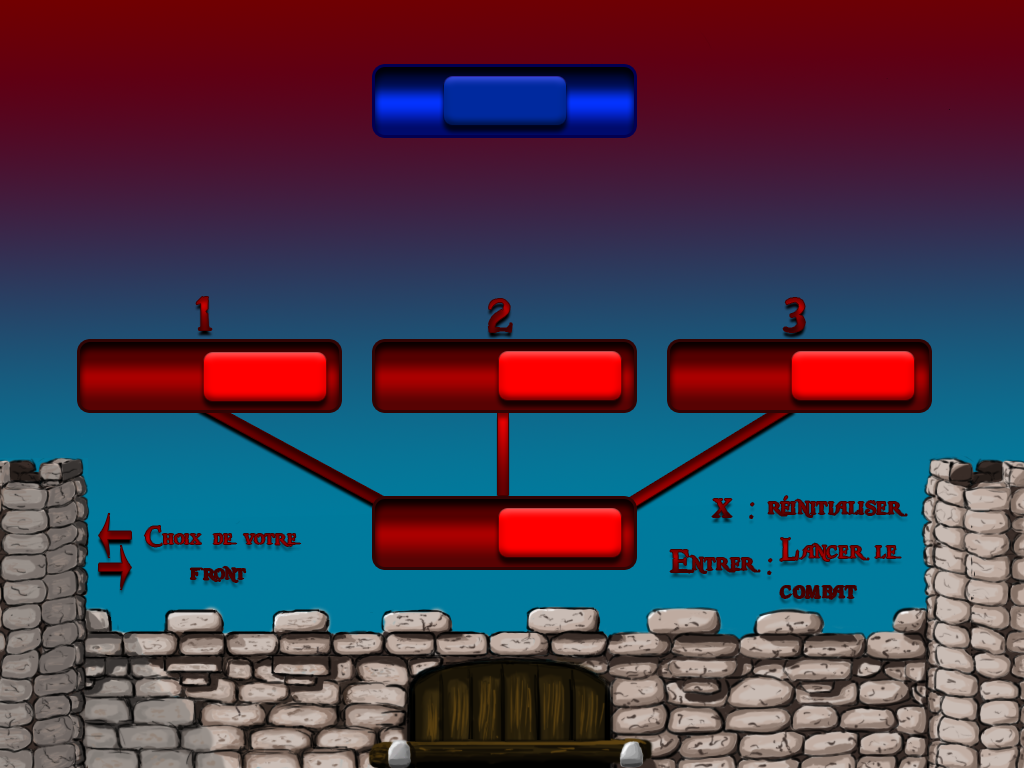
<style>
.page{position:relative;width:1024px;height:768px}
.page>*{position:absolute;margin:0}
.t1{font:50px "PiecesofEight"}
.t2{font:33.3px "PiecesofEight";color:#650101}
.t3{font:29.2px "PiecesofEight"}
.t4{font:33.3px "PiecesofEight"}
</style>
<div class="page">
<p class="t1" style="left:196px;top:297px;width:16px;height:33px">1</p>
<p class="t1" style="left:488px;top:299px;width:24px;height:33px">2</p>
<p class="t1" style="left:783px;top:298px;width:22px;height:34px">3</p>
<p class="t2" style="left:750px;top:496px;width:157px;height:22px">: réinitialiser</p>
<p class="t1" style="left:712px;top:499px;width:20px;height:18px">x</p>
<p class="t3" style="left:144px;top:526px;width:157px;height:56px">Choix de votre <br>    front</p>
<p class="t4" style="left:780px;top:538px;width:121px;height:61px">Lancer le<br>combat</p>
<p class="t4" style="left:670px;top:550px;width:102px;height:24px">Entrer :</p>
</div>
